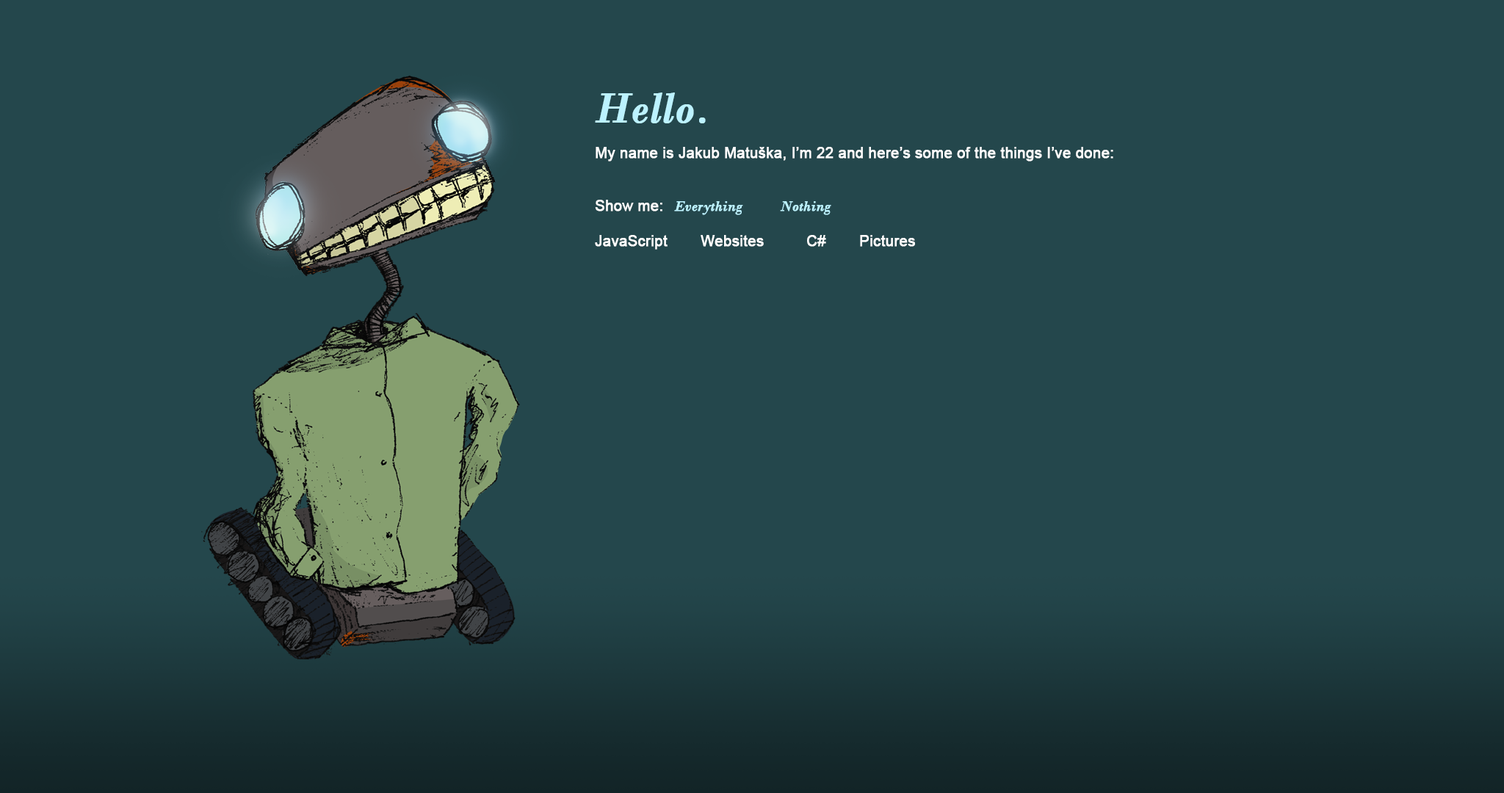
<style>
.page{position:relative;width:1504px;height:793px;background:#24474c}
.page>*{position:absolute;margin:0}
.t1{font:44.1px "BodoniMT-Italic";color:#bcf2ff;font-weight:bold}
.t2{font:14.7px "ArialMT";color:#ffffff;font-weight:bold}
.t3{font:14.7px "BodoniMT-Italic";color:#bcf2ff;font-weight:bold}
</style>
<div class="page">
<p class="t1" style="left:595px;top:93px;width:111px;height:30px">Hello.</p>
<p class="t2" style="left:595px;top:147px;width:518px;height:103px">My name is Jakub Matuška, I’m 22 and here’s some of the things I’ve done:<br><br><br>Show me: <span class="t3">Everything  Nothing<br></span><br>JavaScript  Websites  C#  Pictures</p>
</div>
